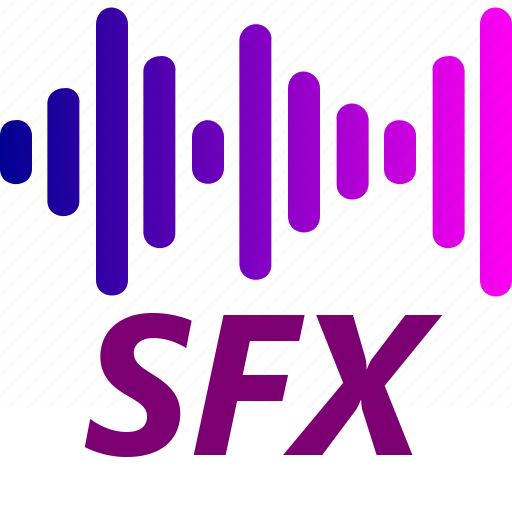
<style>
.page{position:relative;width:512px;height:512px;background:#ffffff}
.page>*{position:absolute;margin:0}
.t1{font:200px "SegoeUI-BoldItalic";color:#7d0073}
</style>
<div class="page">
<p class="t1" style="left:84px;top:313px;width:359px;height:144px">SFX</p>
</div>
